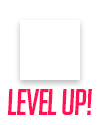
<style>
.page{position:relative;width:100px;height:125px;background:#ffffff}
.page>*{position:absolute;margin:0}
.t1{font:36.1px "BigNoodleTitling-Oblique";letter-spacing:-0.03em;color:#ff1155}
</style>
<div class="page">
<p class="t1" style="left:8px;top:89px;width:84px;height:26px">LEVEL UP!</p>
</div>
